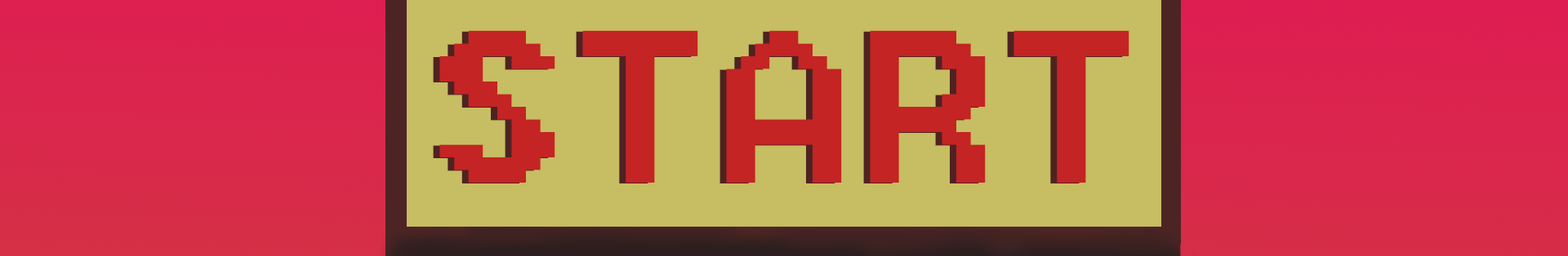
<style>
.page{position:relative;width:1568px;height:256px;background:#c7bd62}
.page>*{position:absolute;margin:0}
.t1{font:270.2px "8514oem";color:#c42424;scale:1.13 1}
</style>
<div class="page">
<p class="t1" style="left:433px;top:31px;width:690px;height:153px">START</p>
<p class="t1" style="left:439px;top:30px;width:690px;height:153px">START</p>
</div>
